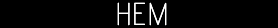
<style>
.page{position:relative;width:278px;height:28px;background:#000000}
.page>*{position:absolute;margin:0}
.t1{font:36px "PrintClearly";color:#ffffff}
</style>
<div class="page">
<p class="t1" style="left:117px;top:2px;width:50px;height:24px">HEM</p>
<p class="t1" style="left:117px;top:2px;width:50px;height:24px">HEM</p>
</div>
